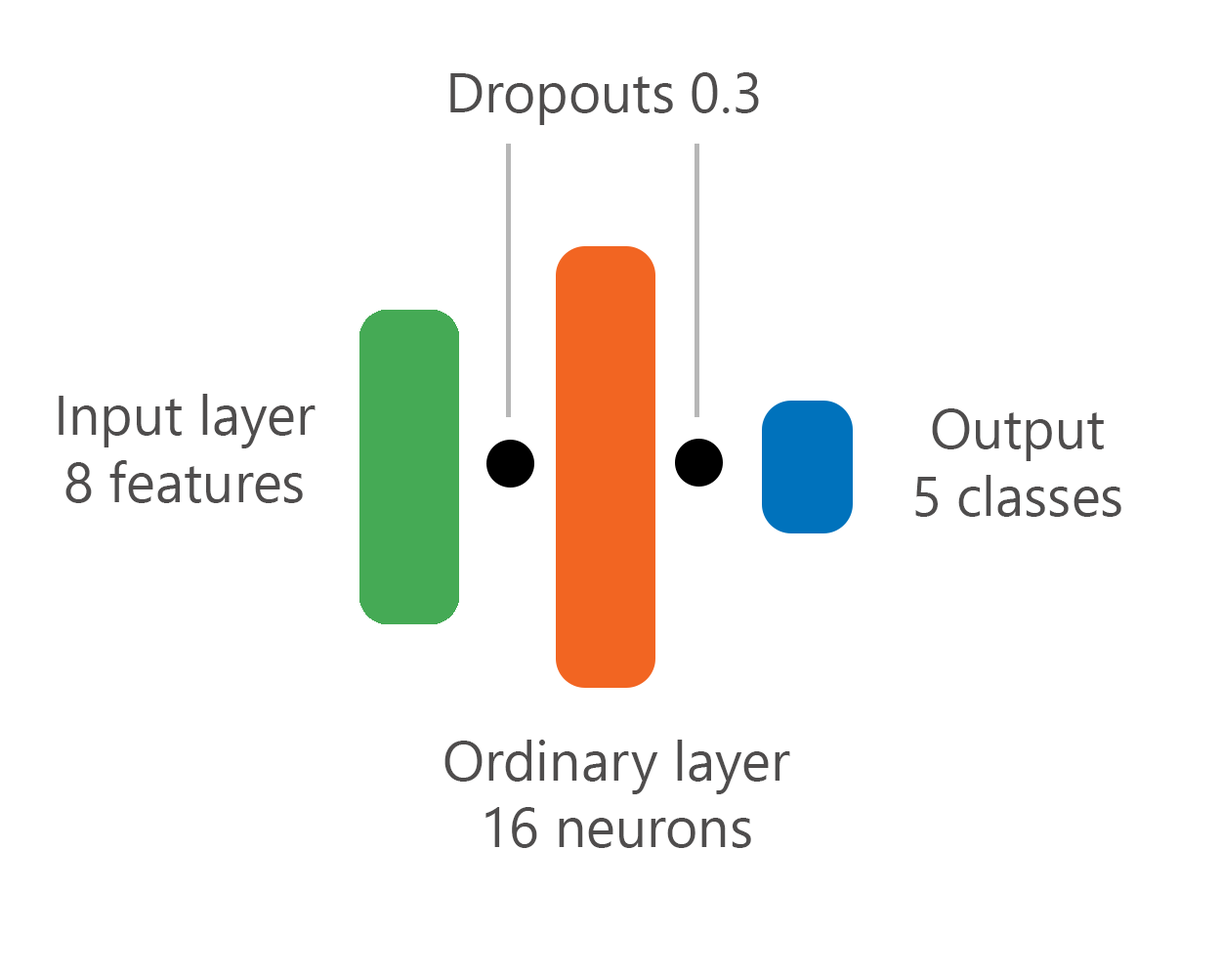
<style>
.page{position:relative;width:1221px;height:977px;background:#ffffff}
.page>*{position:absolute;margin:0}
.t1{font:55.7px "NirmalaUI";color:#4f4d4d}
</style>
<div class="page">
<p class="t1" style="left:450px;top:72px;width:309px;height:53px">Dropouts 0.3</p>
<p class="t1" style="left:59px;top:394px;width:256px;height:109px;text-align:center">Input layer<br>8 features</p>
<p class="t1" style="left:915px;top:408px;width:206px;height:109px;text-align:center">Output<br>5 classes</p>
<p class="t1" style="left:444px;top:739px;width:346px;height:109px;text-align:center">Ordinary layer<br>16 neurons</p>
</div>
